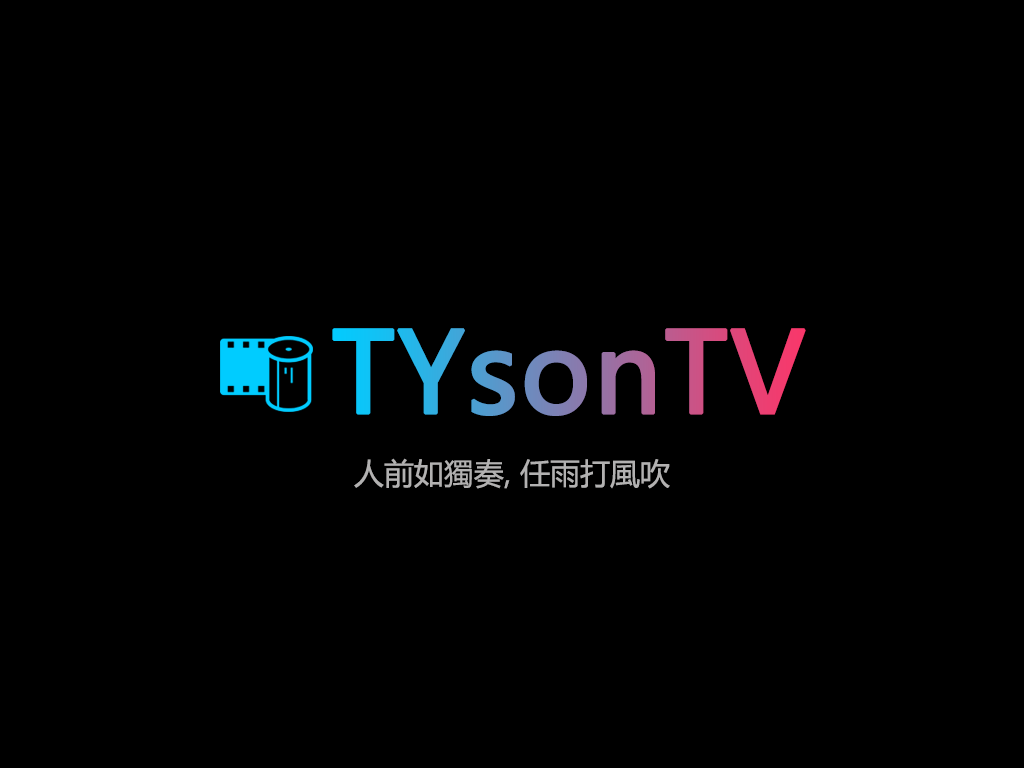
<style>
.page{position:relative;width:1024px;height:768px;background:#000000}
.page>*{position:absolute;margin:0}
.t1{font:110px "MicrosoftYaHei";font-weight:bold}
.t2{font:30px "MicrosoftYaHei";color:#b2b1b1}
</style>
<div class="page">
<p class="t1" style="left:332px;top:328px;width:474px;height:88px">TYsonTV</p>
<p class="t2" style="left:354px;top:458px;width:316px;height:31px">人前如獨奏, 任雨打風吹</p>
</div>
